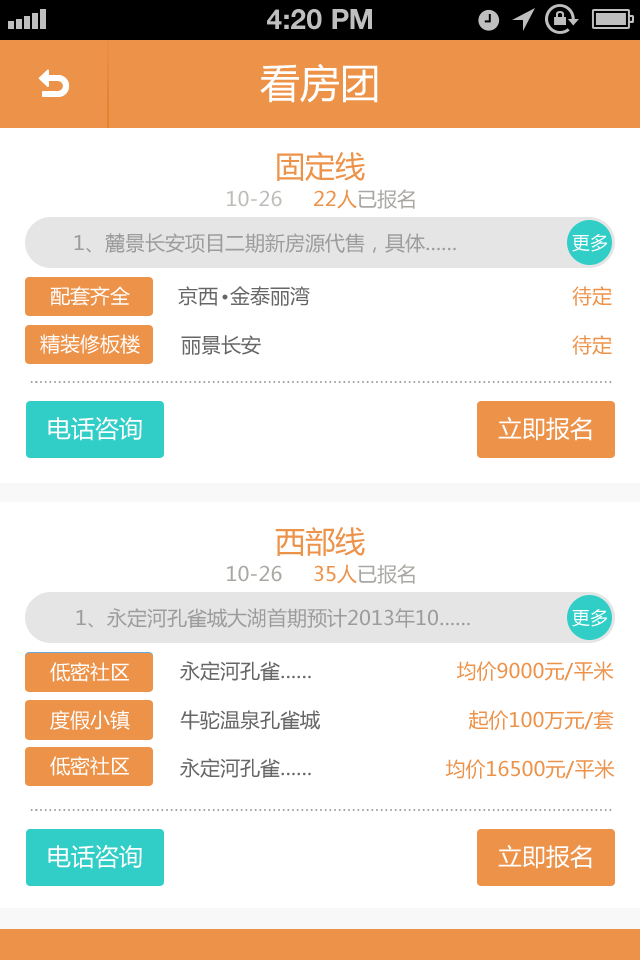
<style>
.page{position:relative;width:640px;height:960px;background:#ffffff}
.page>*{position:absolute;margin:0}
.t1{font:28px "HelveticaNeue-Bold";color:#bfbfbf;text-transform:uppercase}
.t2{font:40px "MicrosoftYaHei";color:#ffffff}
.t3{font:30px "MicrosoftYaHei";color:#ed9249}
.t4{font:20px "MicrosoftYaHei";color:#bfbdb9}
.t5{font:20px "MicrosoftYaHei";color:#ed9249}
.t6{font:20px "MicrosoftYaHei";color:#a9a7a1}
.t7{font:20px "MicrosoftYaHei";color:#9c9c9c}
.t8{font:18px "MicrosoftYaHei";color:#ffffff}
.t9{font:20px "MicrosoftYaHei";color:#ffffff}
.t10{font:20px "MicrosoftYaHei";color:#666666}
.t11{font:24px "MicrosoftYaHei";color:#ffffff}
.t12{font:20px "MicrosoftYaHei"}
</style>
<div class="page">
<p class="t1" style="left:267px;top:9px;width:105px;height:21px">4:20 PM</p>
<p class="t2" style="left:260px;top:63px;width:118px;height:40px">看房团</p>
<p class="t3" style="left:277px;top:151px;width:88px;height:30px">固定线</p>
<p class="t4" style="left:227px;top:190px;width:55px;height:17px">10-26</p>
<p class="t5" style="left:314px;top:189px;width:101px;height:20px">22人<span class="t6">已报名</span></p>
<p class="t7" style="left:74px;top:233px;width:382px;height:20px">1、麓景长安项目二期新房源代售，具体……</p>
<p class="t8" style="left:572px;top:234px;width:35px;height:18px">更多</p>
<p class="t9" style="left:50px;top:286px;width:80px;height:20px">配套齐全</p>
<p class="t10" style="left:178px;top:286px;width:132px;height:20px">京西  金泰丽湾</p>
<p class="t5" style="left:572px;top:286px;width:40px;height:20px">待定</p>
<p class="t9" style="left:40px;top:334px;width:100px;height:20px">精装修板楼</p>
<p class="t10" style="left:181px;top:335px;width:80px;height:20px">丽景长安</p>
<p class="t5" style="left:572px;top:335px;width:40px;height:20px">待定</p>
<p class="t11" style="left:48px;top:417px;width:94px;height:24px">电话咨询</p>
<p class="t11" style="left:498px;top:416px;width:94px;height:25px">立即报名</p>
<p class="t3" style="left:275px;top:527px;width:90px;height:29px">西部线</p>
<p class="t6" style="left:227px;top:565px;width:55px;height:17px">10-26</p>
<p class="t5" style="left:314px;top:564px;width:101px;height:20px">35人<span class="t6">已报名</span></p>
<p class="t7" style="left:76px;top:608px;width:394px;height:20px">1、永定河孔雀城大湖首期预计2013年10……</p>
<p class="t8" style="left:572px;top:609px;width:35px;height:18px">更多</p>
<p class="t12" style="left:50px;top:661px;width:79px;height:20px">低密社区</p>
<p class="t9" style="left:50px;top:662px;width:79px;height:20px">低密社区</p>
<p class="t10" style="left:180px;top:661px;width:131px;height:20px">永定河孔雀……</p>
<p class="t5" style="left:456px;top:661px;width:158px;height:20px">均价9000元/平米</p>
<p class="t12" style="left:50px;top:709px;width:80px;height:20px">度假小镇</p>
<p class="t9" style="left:50px;top:710px;width:80px;height:20px">度假小镇</p>
<p class="t10" style="left:180px;top:710px;width:140px;height:20px">牛驼温泉孔雀城</p>
<p class="t5" style="left:469px;top:710px;width:145px;height:20px">起价100万元/套</p>
<p class="t9" style="left:50px;top:756px;width:79px;height:20px">低密社区</p>
<p class="t10" style="left:180px;top:758px;width:131px;height:20px">永定河孔雀……</p>
<p class="t5" style="left:445px;top:759px;width:170px;height:20px">均价16500元/平米</p>
<p class="t11" style="left:48px;top:845px;width:94px;height:24px">电话咨询</p>
<p class="t11" style="left:498px;top:844px;width:94px;height:25px">立即报名</p>
</div>
